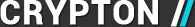
<style>
.page{position:relative;width:195px;height:27px;background:#ffffff}
.page>*{position:absolute;margin:0}
.t1{font:57.2px "Roboto-Bold";letter-spacing:0.025em;color:#ffffff;font-weight:bold}
.t2{font:57.2px "Roboto-Bold";letter-spacing:-0.15em;color:#ffffff;font-weight:bold}
.t3{font:57.2px "Roboto-Bold";letter-spacing:-0.15em;color:#0ad1e5;font-weight:bold}
</style>
<div class="page">
<p class="t1" style="left:0px;top:0px;width:194px;height:27px">CRYPTON <span class="t2">/</span><span class="t3">/</span></p>
</div>
